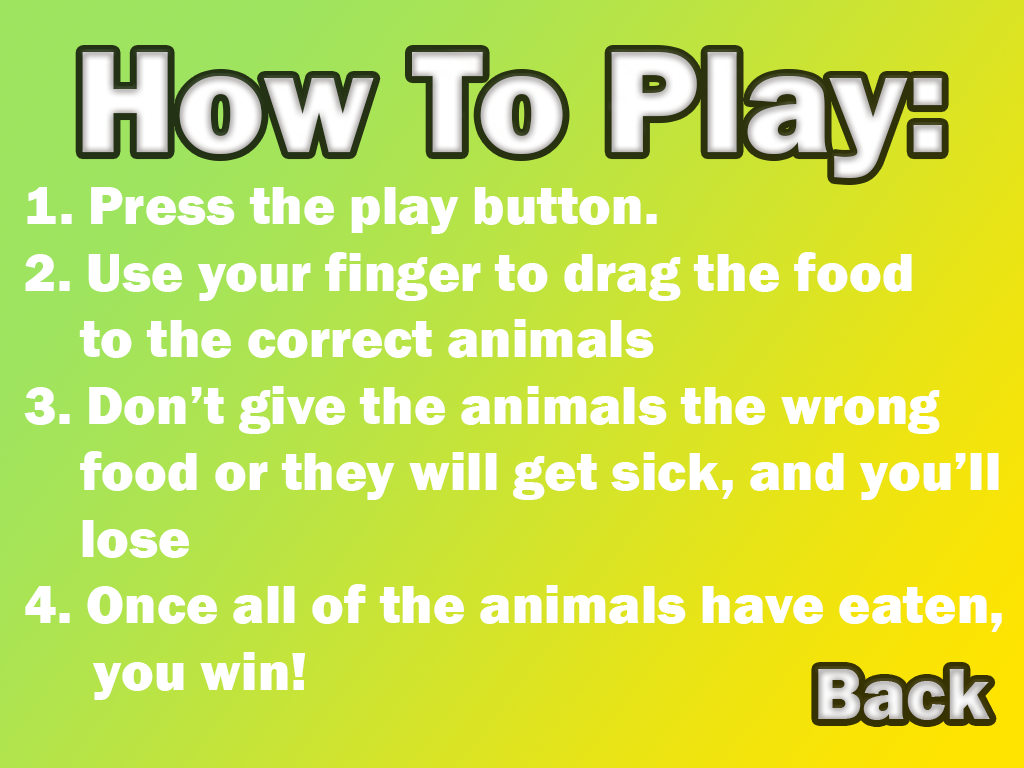
<style>
.page{position:relative;width:1024px;height:768px}
.page>*{position:absolute;margin:0}
.t1{font:150px "FranklinGothic-Heavy";color:#ffffff}
.t2{font:55.4px "FranklinGothic-Heavy";color:#ffffff}
.t3{font:74.6px "FranklinGothic-Heavy"}
</style>
<div class="page">
<p class="t1" style="left:82px;top:52px;width:860px;height:126px">How To Play:</p>
<p class="t2" style="left:24px;top:187px;width:978px;height:513px">1. Press the play button.<br>2. Use your finger to drag the food<br>    to the correct animals<br>3. Don’t give the animals the wrong<br>    food or they will get sick, and you’ll<br>    lose<br>4. Once all of the animals have eaten,<br>     you win!</p>
<p class="t3" style="left:818px;top:669px;width:172px;height:51px">Back</p>
</div>
